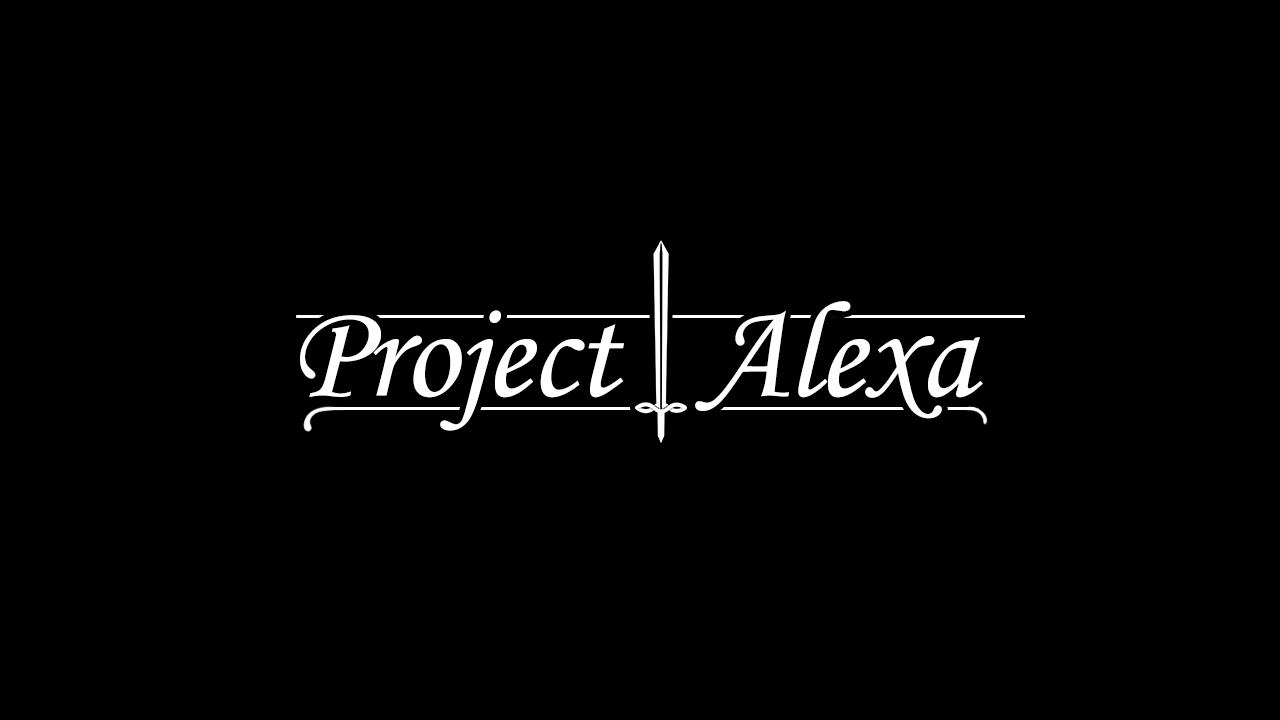
<style>
.page{position:relative;width:1280px;height:720px;background:#000000}
.page>*{position:absolute;margin:0}
.t1{font:136.8px "MonotypeCorsiva";letter-spacing:-0.01em;color:#ffffff}
</style>
<div class="page">
<p class="t1" style="left:300px;top:301px;width:683px;height:130px">Project   Alexa</p>
</div>
